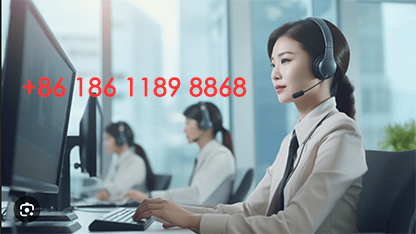
<style>
.page{position:relative;width:416px;height:234px}
.page>*{position:absolute;margin:0}
.t1{font:25px "STXihei";color:#ff3333;font-weight:bold}
</style>
<div class="page">
<p class="t1" style="left:22px;top:77px;width:225px;height:20px">+86 186 1189 8868</p>
</div>
